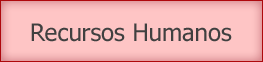
<style>
.page{position:relative;width:263px;height:62px;background:#fec5c5}
.page>*{position:absolute;margin:0}
.t1{font:24px "Tahoma";color:#404040}
</style>
<div class="page">
<p class="t1" style="left:31px;top:23px;width:201px;height:19px">Recursos Humanos</p>
</div>
